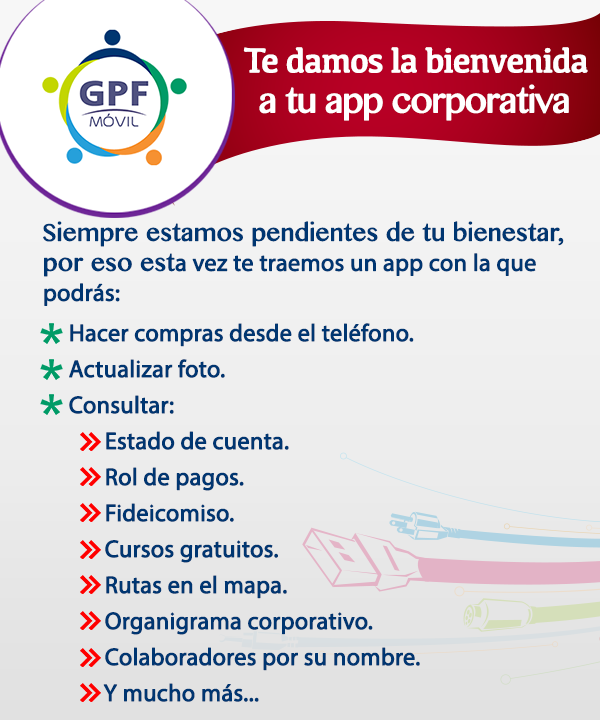
<style>
.page{position:relative;width:600px;height:720px}
.page>*{position:absolute;margin:0}
.t1{font:35px "Kefa-Regular";letter-spacing:-0.05em;color:#ffffff;font-weight:bold}
.t2{font:34.5px "GurmukhiMN";letter-spacing:-0.05em;color:#ffffff;font-weight:bold}
.t3{font:23.9px/30px "GurmukhiMN";letter-spacing:-0.01em;color:#003671;font-weight:bold}
.t4{font:23.9px/30px "MyriadPro-Regular";letter-spacing:-0.01em;color:#003671;font-weight:bold}
.t5{font:24.1px/36px "MyriadPro-Regular";letter-spacing:-0.01em;color:#003671;font-weight:bold}
</style>
<div class="page">
<p class="t1" style="left:243px;top:47px;width:345px;height:26px">Te damos la bienvenida</p>
<p class="t2" style="left:259px;top:84px;width:310px;height:37px">a tu app corporativa</p>
<p class="t3" style="left:43px;top:221px;width:521px;height:85px">Siempre estamos pendientes de tu bienestar,<br>por eso est<span class="t4">a vez te traemos un app con la que<br>podrás:</span></p>
<p class="t5" style="left:69px;top:323px;width:351px;height:379px">Hacer compras desde el teléfono.<br>  Actualizar foto.<br>  Consultar:<br>   Estado de cuenta.<br>   Rol de pagos.<br>   Fideicomiso.<br>   Cursos gratuitos.<br>   Rutas en el mapa.<br>   Organigrama corporativo.<br>   Colaboradores por su nombre.<br>   Y mucho más...</p>
</div>
